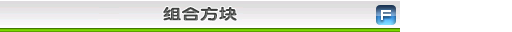
<style>
.page{position:relative;width:512px;height:32px;background:#ffffff}
.page>*{position:absolute;margin:0}
.t1{font:14.9px "DFPYuanW9";scale:1.25 1}
</style>
<div class="page">
<p class="t1" style="left:163px;top:6px;width:74px;height:15px">组合方块</p>
</div>
